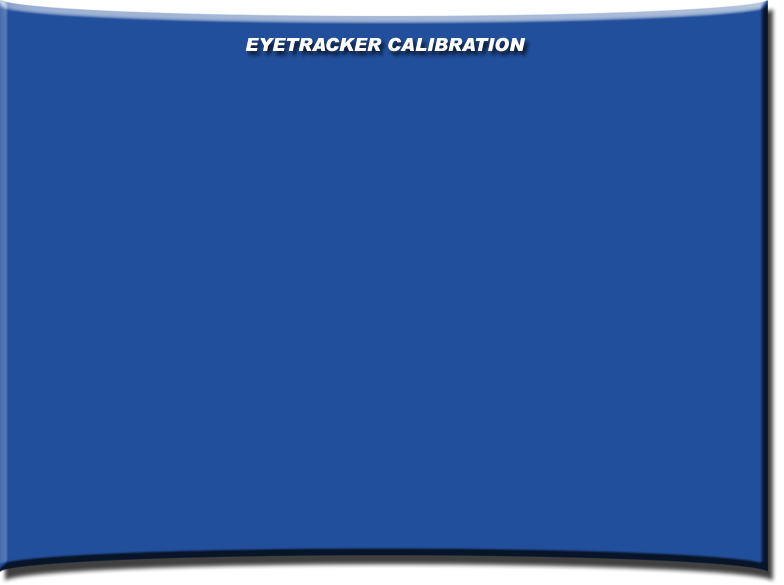
<style>
.page{position:relative;width:784px;height:585px;background:#214f9c}
.page>*{position:absolute;margin:0}
.t1{font:18px "Arial-BlackItalic";color:#ffffff}
</style>
<div class="page">
<p class="t1" style="left:245px;top:37px;width:281px;height:15px">EYETRACKER CALIBRATION</p>
</div>
